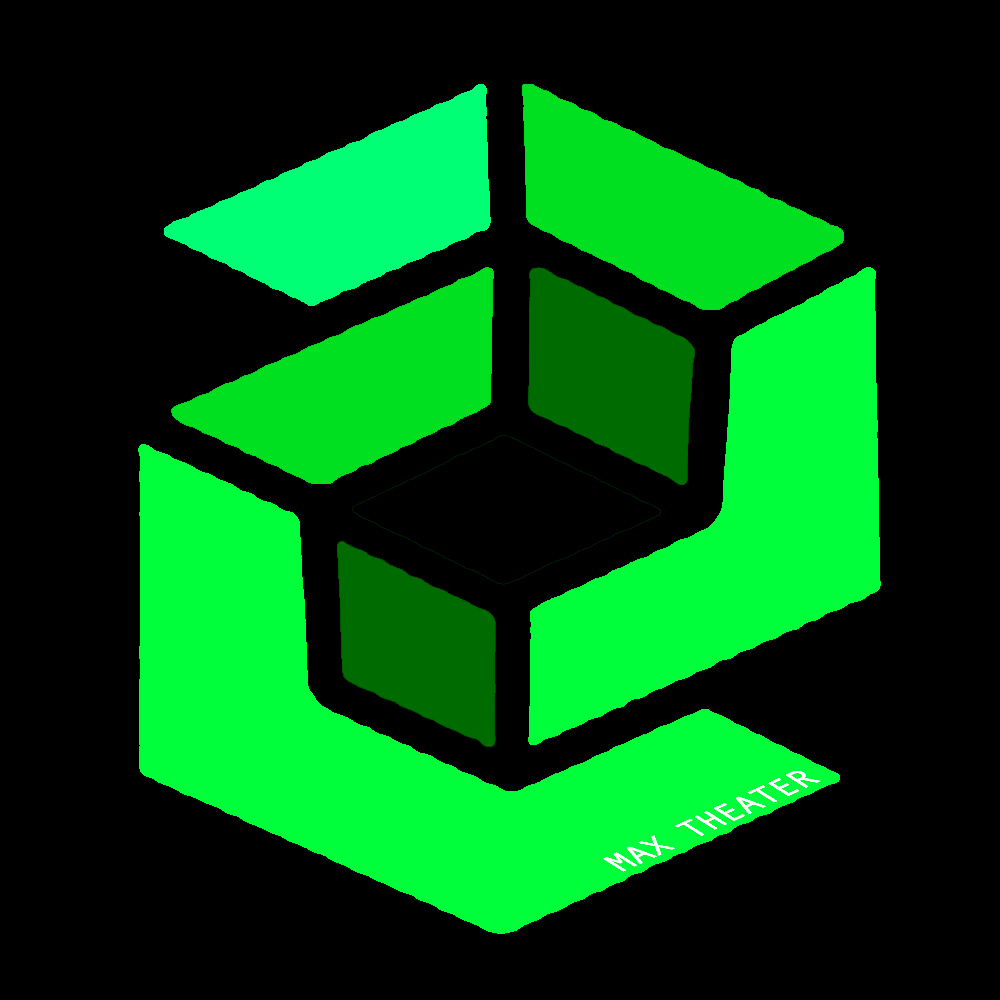
<style>
.page{position:relative;width:1000px;height:1000px;background:#000000}
.page>*{position:absolute;margin:0}
.t1{font:34.2px "AndaleMono";color:#ffffff}
</style>
<div class="page">
<p class="t1" style="left:603px;top:771px;width:217px;height:101px;rotate:-25deg">MAX THEATER</p>
<p class="t1" style="left:603px;top:771px;width:217px;height:101px;rotate:-25deg">MAX THEATER</p>
<p class="t1" style="left:603px;top:771px;width:217px;height:101px;rotate:-25deg">MAX THEATER</p>
<p class="t1" style="left:603px;top:771px;width:217px;height:101px;rotate:-25deg">MAX THEATER</p>
<p class="t1" style="left:603px;top:771px;width:217px;height:101px;rotate:-25deg">MAX THEATER</p>
</div>
